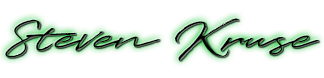
<style>
.page{position:relative;width:324px;height:78px;background:#ffffff}
.page>*{position:absolute;margin:0}
.t1{font:41.3px "Quentin";scale:1.37 1}
</style>
<div class="page">
<p class="t1" style="left:5px;top:18px;width:314px;height:43px">Steven Kruse</p>
</div>
